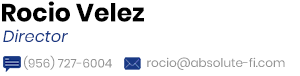
<style>
.page{position:relative;width:300px;height:76px;background:#ffffff}
.page>*{position:absolute;margin:0}
.t1{font:25px "Poppins-Bold";color:#000000}
.t2{font:16.2px "Poppins-Italic";color:#183884}
.t3{font:12px "Poppins-Regular";color:#939393}
</style>
<div class="page">
<p class="t1" style="left:2px;top:1px;width:142px;height:21px">Rocio Velez</p>
<p class="t2" style="left:3px;top:29px;width:65px;height:13px">Director</p>
<p class="t3" style="left:24px;top:55px;width:88px;height:15px">(956) 727-6004</p>
<p class="t3" style="left:147px;top:57px;width:138px;height:13px">rocio@absolute-fi.com</p>
</div>
